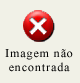
<style>
.page{position:relative;width:80px;height:83px;background:#f1f1e7}
.page>*{position:absolute;margin:0}
.t1{font:12px/14px "TimesNewRomanPSMT";letter-spacing:0.075em;color:#040404}
</style>
<div class="page">
<p class="t1" style="left:5px;top:49px;width:68px;height:23px;text-align:center">Imagem não<br>encontrada</p>
</div>
